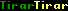
<style>
.page{position:relative;width:68px;height:11px;background:#000000}
.page>*{position:absolute;margin:0}
.t1{font:13.2px "Onesize";color:#009900;scale:0.91 1}
.t2{font:13.2px "Onesize";color:#ffff66;scale:0.91 1}
</style>
<div class="page">
<p class="t1" style="left:0px;top:1px;width:34px;height:8px">Tirar</p>
<p class="t2" style="left:34px;top:1px;width:34px;height:8px">Tirar</p>
</div>
